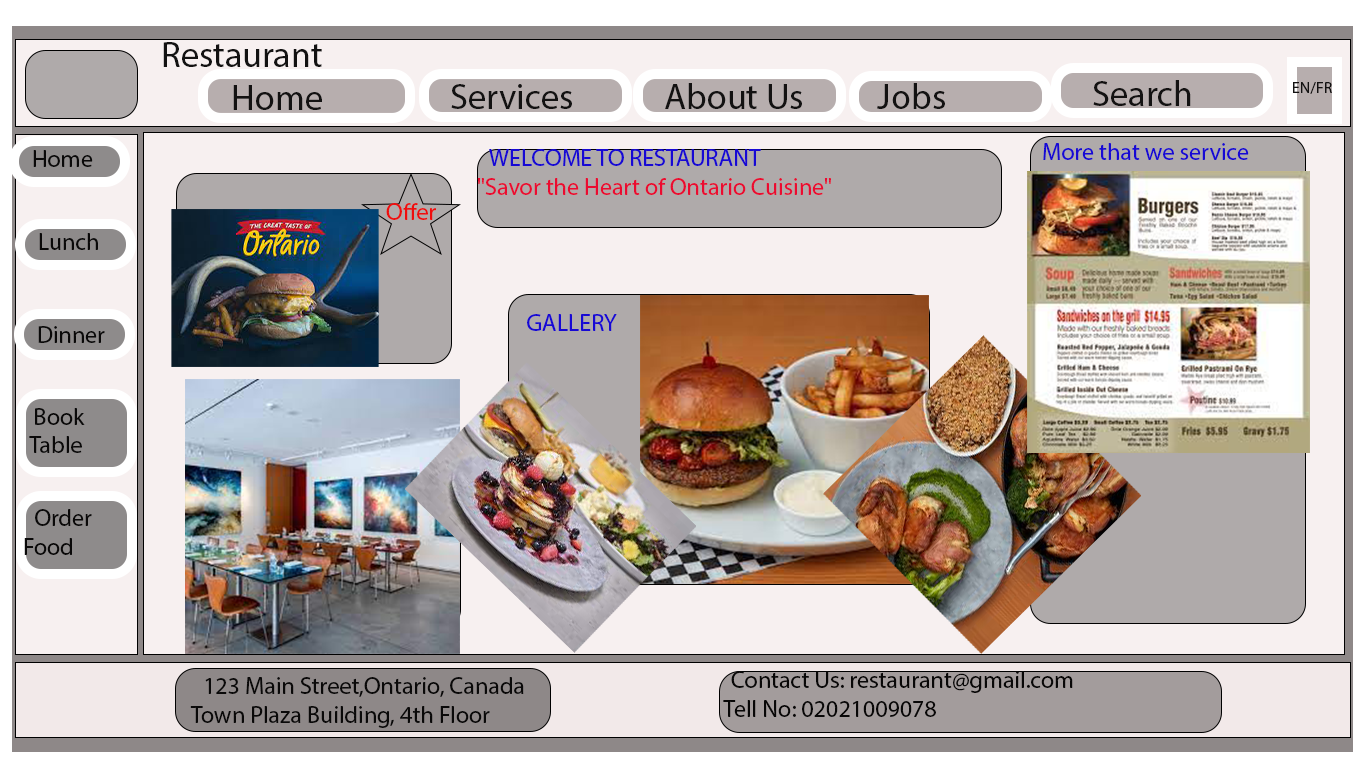
<style>
.page{position:relative;width:1366px;height:768px;background:#f7f0f0}
.page>*{position:absolute;margin:0}
.t1{font:36px "MyriadPro-Regular";color:#131212}
.t2{font:36.4px "MyriadPro-Regular";color:#131212}
.t3{font:16px "MyriadPro-Regular";color:#131212}
.t4{font:24px "MyriadPro-Regular";color:#0a0909}
.t5{font:24px "MyriadPro-Regular";color:#eb0b30}
.t6{font:24px "MyriadPro-Regular";color:#1708d4}
.t7{font:24px "MyriadPro-Regular";color:#ef0d0d}
.t8{font:24px "MyriadPro-Regular";color:#080707}
</style>
<div class="page">
<p class="t1" style="left:163px;top:42px;width:159px;height:25px">Restaurant</p>
<p class="t1" style="left:233px;top:85px;width:89px;height:25px">Home</p>
<p class="t1" style="left:451px;top:84px;width:121px;height:25px">Services</p>
<p class="t1" style="left:665px;top:83px;width:137px;height:26px">About Us</p>
<p class="t2" style="left:877px;top:83px;width:68px;height:26px">Jobs</p>
<p class="t1" style="left:1093px;top:80px;width:98px;height:26px">Search</p>
<p class="t3" style="left:1293px;top:82px;width:39px;height:12px">EN/FR</p>
<p class="t4" style="left:33px;top:150px;width:60px;height:17px">Home</p>
<p class="t5" style="left:477px;top:149px;width:354px;height:46px"><span class="t6">WELCOME TO RESTAURANT<br></span>"Savor the Heart of Ontario Cuisine"</p>
<p class="t6" style="left:1043px;top:143px;width:206px;height:17px">More that we service</p>
<p class="t7" style="left:386px;top:203px;width:50px;height:17px">Offer<span class="t4">s</span></p>
<p class="t4" style="left:39px;top:233px;width:59px;height:17px">Lunch</p>
<p class="t6" style="left:527px;top:314px;width:90px;height:17px">GALLERY</p>
<p class="t4" style="left:38px;top:326px;width:67px;height:17px">Dinner</p>
<p class="t4" style="left:29px;top:408px;width:56px;height:45px">Book Table</p>
<p class="t4" style="left:24px;top:509px;width:68px;height:46px">Order Food</p>
<p class="t4" style="left:190px;top:677px;width:334px;height:51px">123 Main Street,Ontario, Canada<br>Town Plaza Building, 4th Floor</p>
<p class="t8" style="left:723px;top:671px;width:350px;height:46px">Contact Us: restaurant@gmail.com <br> Tell No: 02021009078</p>
</div>
